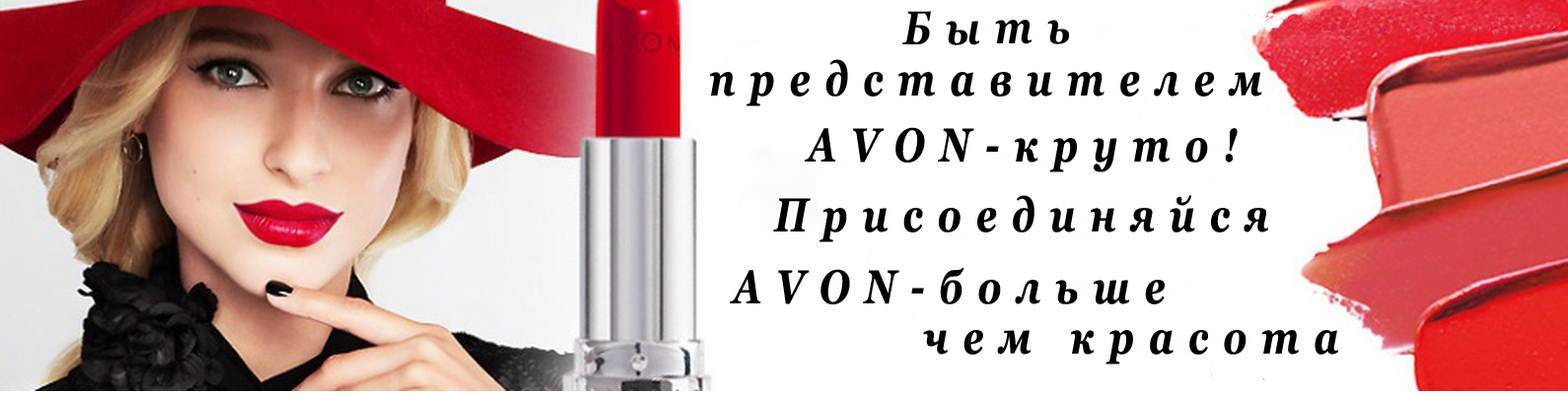
<style>
.page{position:relative;width:1568px;height:394px;background:#ffffff}
.page>*{position:absolute;margin:0}
.t1{font:47.3px "Georgia-BoldItalic";letter-spacing:0.4em;color:#020001;scale:0.79 1}
</style>
<div class="page">
<p class="t1" style="left:902px;top:11px;width:167px;height:34px">Быть</p>
<p class="t1" style="left:709px;top:59px;width:553px;height:48px">представителем</p>
<p class="t1" style="left:804px;top:127px;width:434px;height:46px">AVON-круто!</p>
<p class="t1" style="left:773px;top:195px;width:495px;height:48px">Присоединяйся</p>
<p class="t1" style="left:730px;top:267px;width:435px;height:38px">AVON-больше</p>
<p class="t1" style="left:923px;top:330px;width:415px;height:35px">чем красота</p>
</div>
